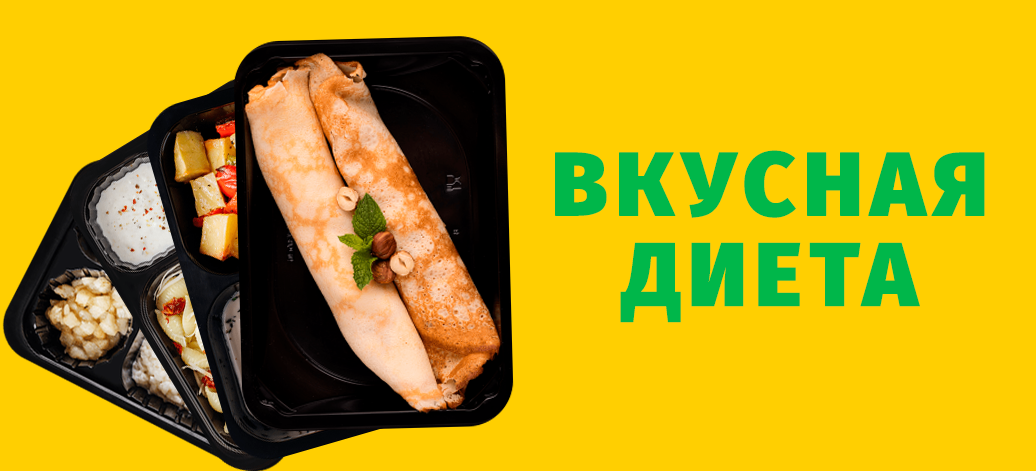
<style>
.page{position:relative;width:1036px;height:471px;background:#ffcf01}
.page>*{position:absolute;margin:0}
.t1{font:90.4px/90.4px "FiraSans-Black";letter-spacing:0.06em;color:#00b74a;font-weight:bold}
</style>
<div class="page">
<p class="t1" style="left:555px;top:150px;width:430px;height:173px;text-align:center">ВКУСНАЯ<br>ДИЕТА</p>
</div>
